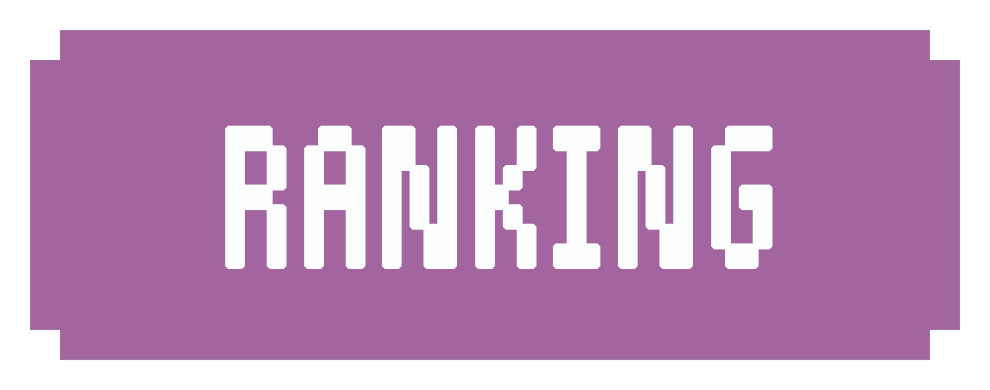
<style>
.page{position:relative;width:990px;height:390px;background:#a365a0}
.page>*{position:absolute;margin:0}
.t1{font:255px "Pixelade";letter-spacing:0.025em;color:#fcfefe;font-weight:bold;scale:0.71 1}
</style>
<div class="page">
<p class="t1" style="left:225px;top:125px;width:548px;height:144px">RANKING</p>
</div>
